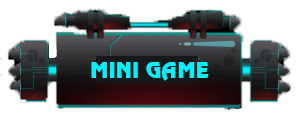
<style>
.page{position:relative;width:298px;height:122px;background:#ffffff}
.page>*{position:absolute;margin:0}
.t1{font:20px "VNI-Revue-Bold";color:#00f2fa}
</style>
<div class="page">
<p class="t1" style="left:91px;top:62px;width:118px;height:19px">MINI GAME</p>
</div>
